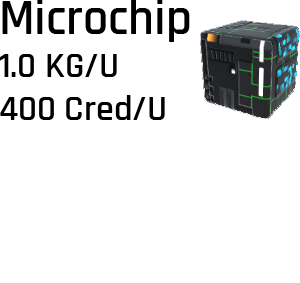
<style>
.page{position:relative;width:300px;height:283px;background:#ffffff}
.page>*{position:absolute;margin:0}
.t1{font:36px "Rajdhani-SemiBold";color:#000000}
.t2{font:50px "Rajdhani-SemiBold";color:#000000}
</style>
<div class="page">
<p class="t1" style="left:0px;top:0px;width:190px;height:120px"><span class="t2">Microchip<br></span>1.0 KG/U<br>400 Cred/U</p>
</div>
